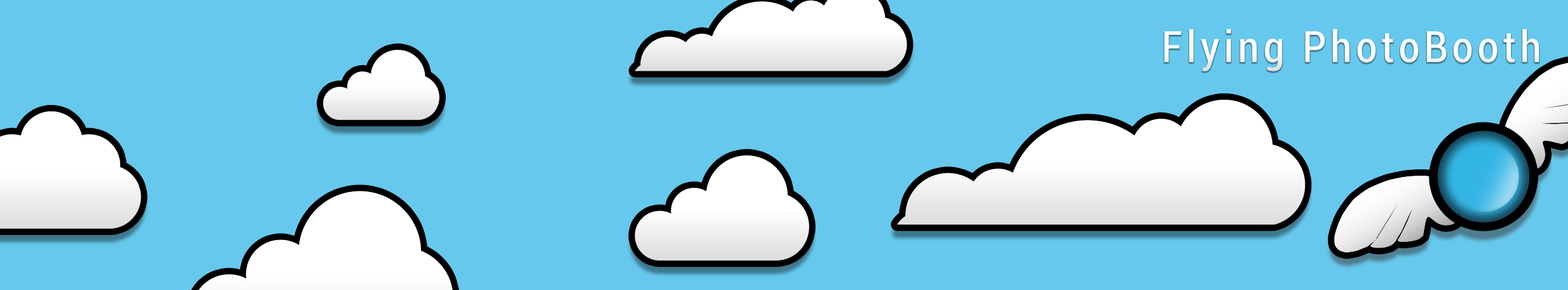
<style>
.page{position:relative;width:1568px;height:290px;background:#66c8ec}
.page>*{position:absolute;margin:0}
.t1{font:43px "Roboto-Condensed";letter-spacing:0.1em;color:#ffffff}
</style>
<div class="page">
<p class="t1" style="left:1164px;top:29px;width:375px;height:42px">Flying PhotoBooth</p>
</div>
